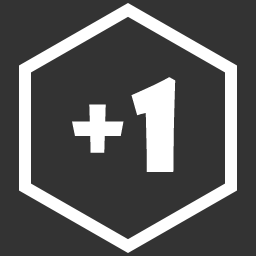
<style>
.page{position:relative;width:256px;height:256px;background:#333333}
.page>*{position:absolute;margin:0}
.t1{font:121.3px "ShowcardGothic-Reg";color:#ffffff}
</style>
<div class="page">
<p class="t1" style="left:72px;top:77px;width:104px;height:95px">+1</p>
</div>
